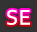
<style>
.page{position:relative;width:37px;height:32px;background:#333333}
.page>*{position:absolute;margin:0}
.t1{font:22px "Corbel";letter-spacing:0.035em;color:#ffffff}
</style>
<div class="page">
<p class="t1" style="left:7px;top:9px;width:23px;height:16px">SE</p>
</div>
